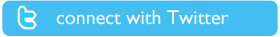
<style>
.page{position:relative;width:280px;height:37px;background:#43bdf2}
.page>*{position:absolute;margin:0}
.t1{font:19.9px "GillSans";color:#ffffff}
</style>
<div class="page">
<p class="t1" style="left:56px;top:10px;width:173px;height:15px">connect with Twitter</p>
</div>
